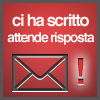
<style>
.page{position:relative;width:100px;height:100px}
.page>*{position:absolute;margin:0}
.t1{font:13.3px "Helvetica-Bold";letter-spacing:-0.08em;color:#fbfbfb}
.t2{font:16.7px "Helvetica-Bold";letter-spacing:-0.08em;color:#faf6f6}
.t3{font:36.2px "Helvetica-Bold";letter-spacing:-0.08em}
</style>
<div class="page">
<p class="t1" style="left:7px;top:14px;width:88px;height:31px;text-align:center"><span class="t2">ci ha scritto<br></span>attende risposta</p>
<p class="t3" style="left:78px;top:58px;width:6px;height:26px">!</p>
</div>
